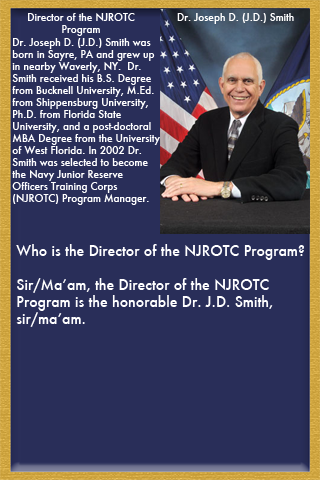
<style>
.page{position:relative;width:320px;height:480px;background:#292e59}
.page>*{position:absolute;margin:0}
.t1{font:10px "Futura-Medium";color:#ffffff}
.t2{font:14px "Futura-Medium";color:#ffffff}
</style>
<div class="page">
<p class="t1" style="left:28px;top:13px;width:107px;height:23px;text-align:center">Director of the NJROTC<br>Program</p>
<p class="t1" style="left:177px;top:13px;width:117px;height:11px">Dr. Joseph D. (J.D.) Smith</p>
<p class="t1" style="left:12px;top:38px;width:148px;height:167px">Dr. Joseph D. (J.D.) Smith was <br>born in Sayre, PA and grew up <br>in nearby Waverly, NY.  Dr. <br>Smith received his B.S. Degree <br>from Bucknell University, M.Ed. <br>from Shippensburg University, <br>Ph.D. from Florida State <br>University, and a post-doctoral <br>MBA Degree from the University <br>of West Florida. In 2002 Dr. <br>Smith was selected to become <br>the Navy Junior Reserve <br>Officers Training Corps <br>(NJROTC) Program Manager.</p>
<p class="t2" style="left:16px;top:244px;width:288px;height:83px">Who is the Director of the NJROTC Program?<br><br>Sir/Ma’am, the Director of the NJROTC <br>Program is the honorable Dr. J.D. Smith, <br>sir/ma’am.</p>
</div>
